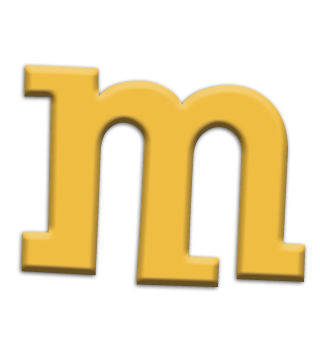
<style>
.page{position:relative;width:320px;height:352px;background:#ffffff}
.page>*{position:absolute;margin:0}
.t1{font:422px "FinkHeavy";color:#efbd42}
</style>
<div class="page">
<p class="t1" style="left:21px;top:65px;width:285px;height:222px;rotate:3deg">m</p>
</div>
